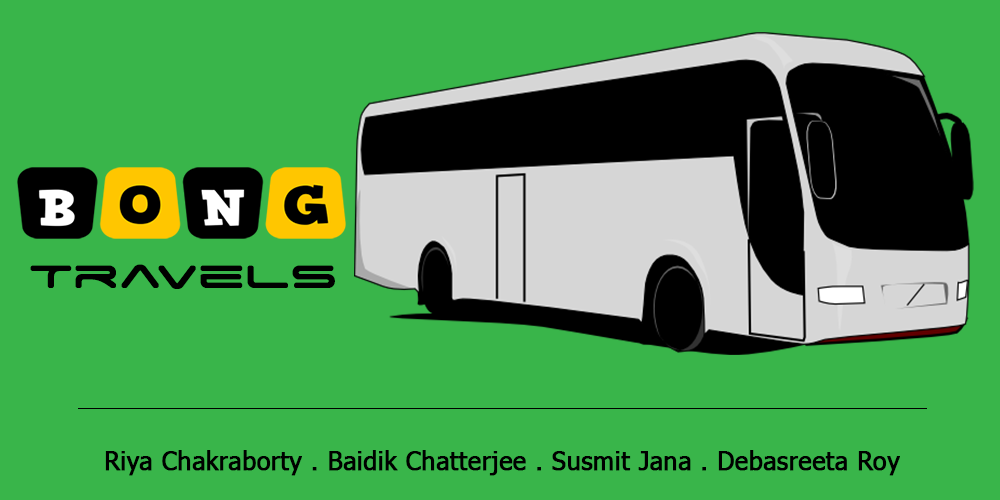
<style>
.page{position:relative;width:1000px;height:500px;background:#39b54a}
.page>*{position:absolute;margin:0}
.t1{font:50px "SpaceAge";color:#000000;font-weight:bold}
.t2{font:25px "Tahoma";color:#000000;font-weight:bold}
</style>
<div class="page">
<p class="t1" style="left:30px;top:264px;width:305px;height:25px">Travels</p>
<p class="t2" style="left:105px;top:450px;width:795px;height:26px">Riya Chakraborty . Baidik Chatterjee . Susmit Jana . Debasreeta Roy</p>
</div>
